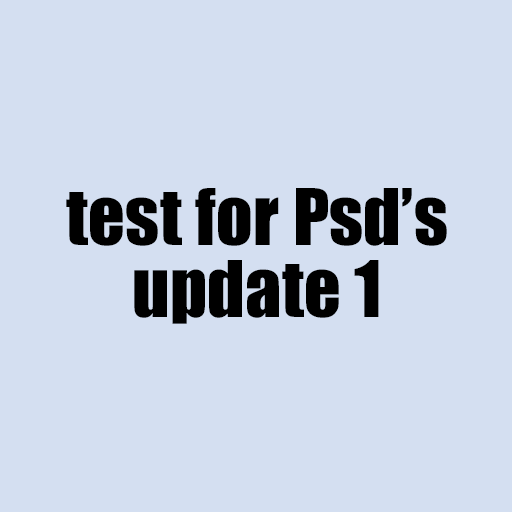
<style>
.page{position:relative;width:512px;height:512px;background:#d4dff1}
.page>*{position:absolute;margin:0}
.t1{font:72px/72px "Impact";letter-spacing:0.005em;color:#000000}
</style>
<div class="page">
<p class="t1" style="left:66px;top:188px;width:381px;height:136px;text-align:center">test for Psd’s<br>update 1</p>
</div>
